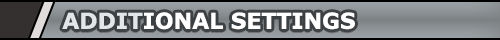
<style>
.page{position:relative;width:500px;height:40px}
.page>*{position:absolute;margin:0}
.t1{font:22px "Verdana-Bold";color:#ffffff}
.t2{font:22px "Verdana-Bold";color:#e2e6e9}
</style>
<div class="page">
<p class="t1" style="left:62px;top:12px;width:293px;height:18px"><span class="t2">ADDIT</span>IONAL SETTINGS</p>
</div>
